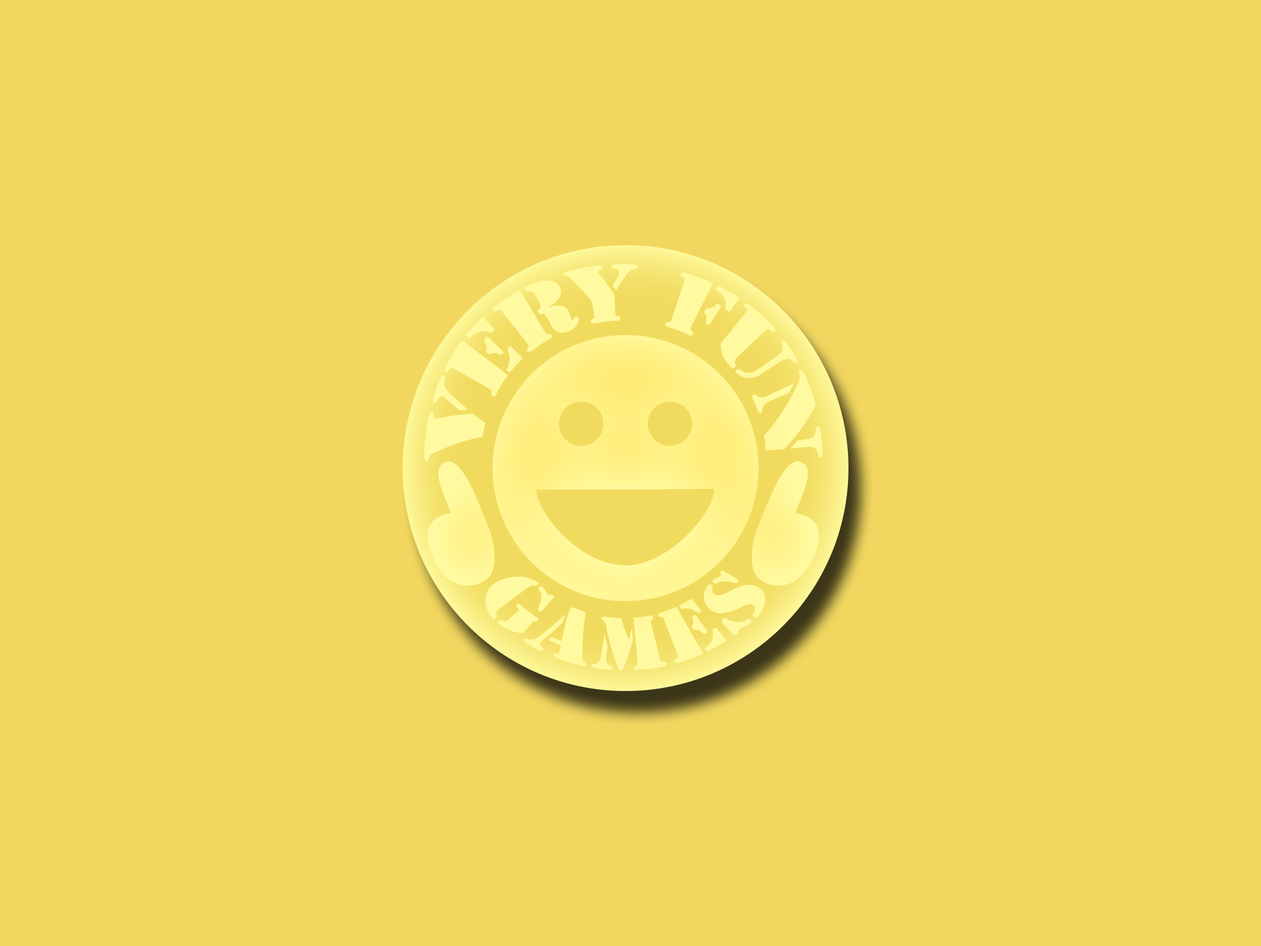
<style>
.page{position:relative;width:1261px;height:946px;background:#f1d75f}
.page>*{position:absolute;margin:0}
.t1{font:50.5px "StencilStd";color:#fffaa0}
.t2{font:59.1px "StencilStd";color:#fffaa0}
</style>
<div class="page">
<p class="t1" style="left:424px;top:264px;width:399px;height:198px">VERY FUN</p>
<p class="t2" style="left:485px;top:570px;width:280px;height:100px">GAMES</p>
</div>
